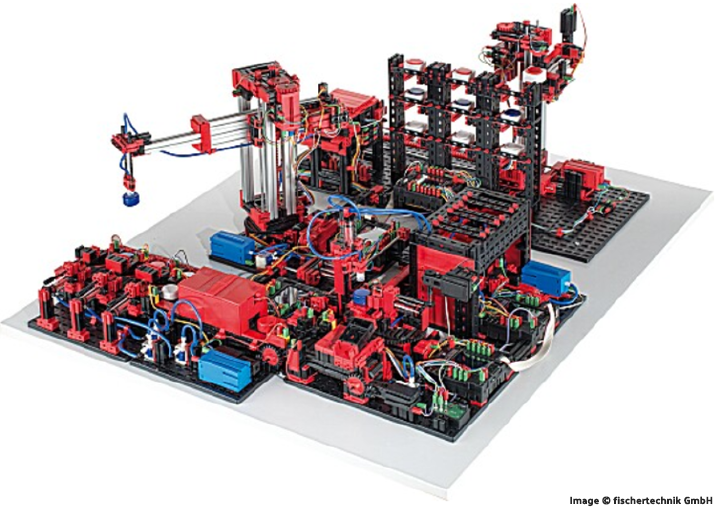
<style>
.page{position:relative;width:720px;height:508px;background:#ffffff}
.page>*{position:absolute;margin:0}
.t1{font:10px "PalanquinDark-Regular";color:#282828;font-weight:bold}
</style>
<div class="page">
<p class="t1" style="left:570px;top:496px;width:143px;height:11px">Image © fischertechnik GmbH</p>
</div>
